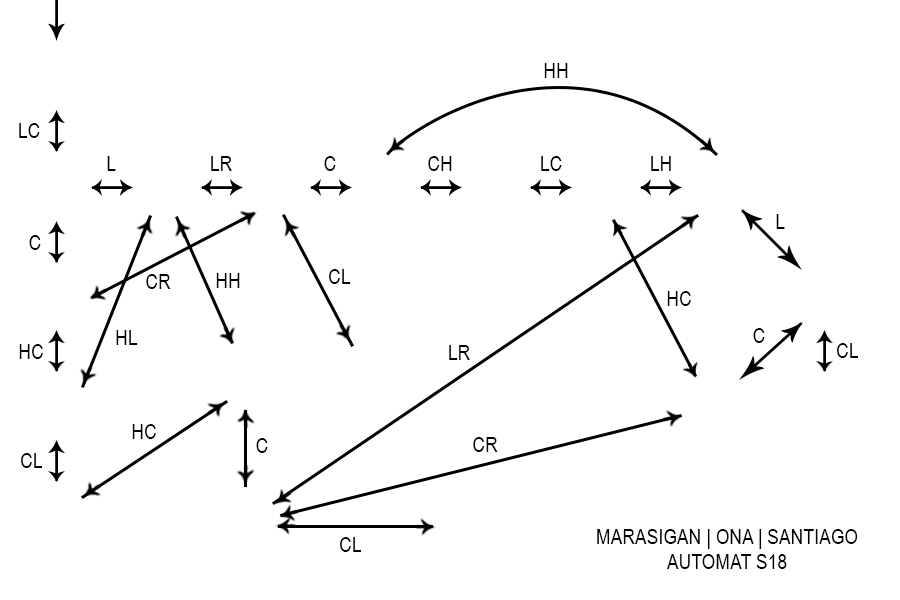
<style>
.page{position:relative;width:900px;height:600px;background:#ffffff}
.page>*{position:absolute;margin:0}
.t1{font:21.4px "ArialNarrow";color:#000000;text-transform:uppercase}
</style>
<div class="page">
<p class="t1" style="left:544px;top:63px;width:24px;height:15px">hh</p>
<p class="t1" style="left:19px;top:123px;width:21px;height:15px">LC</p>
<p class="t1" style="left:107px;top:156px;width:9px;height:15px">l</p>
<p class="t1" style="left:211px;top:156px;width:21px;height:15px">Lr</p>
<p class="t1" style="left:324px;top:156px;width:12px;height:15px">c</p>
<p class="t1" style="left:428px;top:156px;width:24px;height:15px">ch</p>
<p class="t1" style="left:541px;top:156px;width:21px;height:15px">lc</p>
<p class="t1" style="left:651px;top:156px;width:20px;height:15px">lh</p>
<p class="t1" style="left:776px;top:214px;width:9px;height:15px">l</p>
<p class="t1" style="left:29px;top:235px;width:12px;height:15px">C</p>
<p class="t1" style="left:329px;top:269px;width:22px;height:15px">cl</p>
<p class="t1" style="left:146px;top:274px;width:25px;height:15px">cr</p>
<p class="t1" style="left:216px;top:273px;width:24px;height:15px">hh</p>
<p class="t1" style="left:667px;top:291px;width:24px;height:15px">hc</p>
<p class="t1" style="left:753px;top:328px;width:12px;height:15px">c</p>
<p class="t1" style="left:116px;top:330px;width:22px;height:15px">hl</p>
<p class="t1" style="left:19px;top:344px;width:24px;height:15px">hc</p>
<p class="t1" style="left:449px;top:345px;width:21px;height:15px">lr</p>
<p class="t1" style="left:837px;top:343px;width:22px;height:15px">cl</p>
<p class="t1" style="left:132px;top:424px;width:24px;height:15px">hc</p>
<p class="t1" style="left:256px;top:438px;width:12px;height:15px">c</p>
<p class="t1" style="left:473px;top:437px;width:25px;height:15px">cr</p>
<p class="t1" style="left:21px;top:453px;width:22px;height:15px">cl</p>
<p class="t1" style="left:597px;top:529px;width:261px;height:40px;text-align:center">MARASIGAN | ONA | SANTIAGO<br>AUTOMAT S18</p>
<p class="t1" style="left:340px;top:537px;width:22px;height:15px">CL</p>
</div>
